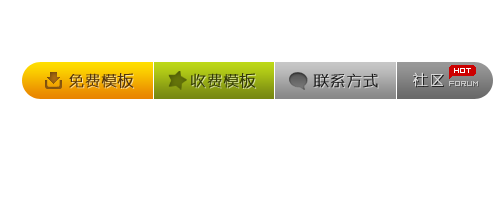
<style>
.page{position:relative;width:500px;height:200px;background:#ffffff}
.page>*{position:absolute;margin:0}
.t1{font:16px "ZHSRXT--GBK1-0";color:#402501;font-weight:bold}
.t2{font:16px "ZHSRXT--GBK1-0";color:#181818;font-weight:bold}
.t3{font:6px "04b08";color:#ffffff}
.t4{font:6px "04b08";color:#c6c6c6;font-weight:bold}
</style>
<div class="page">
<p class="t1" style="left:69px;top:73px;width:65px;height:15px">免费模板</p>
<p class="t1" style="left:190px;top:73px;width:66px;height:15px">收费模板</p>
<p class="t2" style="left:313px;top:73px;width:65px;height:15px">联系方式</p>
<p class="t3" style="left:454px;top:68px;width:17px;height:5px">HOT</p>
<p class="t4" style="left:449px;top:81px;width:29px;height:5px">Forum</p>
</div>
